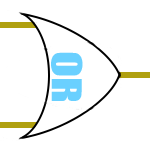
<style>
.page{position:relative;width:150px;height:150px;background:#ffffff}
.page>*{position:absolute;margin:0}
.t1{font:38.1px "Impact";color:#6ad0ff;scale:1.26 1}
</style>
<div class="page">
<p class="t1" style="left:51px;top:52px;width:32px;height:49px;rotate:90deg">OR</p>
</div>
